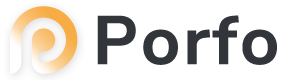
<style>
.page{position:relative;width:283px;height:80px;background:#ffffff}
.page>*{position:absolute;margin:0}
.t1{font:68px "NunitoSans-Bold";letter-spacing:0.02em;color:#32363b;font-weight:bold}
</style>
<div class="page">
<p class="t1" style="left:97px;top:15px;width:180px;height:50px">Porfo</p>
</div>
